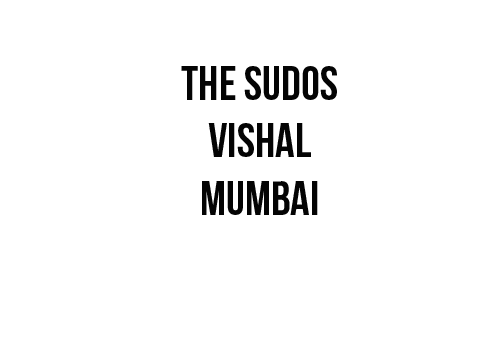
<style>
.page{position:relative;width:504px;height:360px;background:#ffffff}
.page>*{position:absolute;margin:0}
.t1{font:48px "BebasNeueBold";color:#040404}
</style>
<div class="page">
<p class="t1" style="left:181px;top:66px;width:156px;height:149px;text-align:center">The sudos<br>vishal<br>mumbai</p>
</div>
